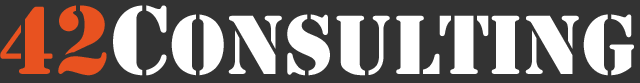
<style>
.page{position:relative;width:640px;height:83px;background:#333333}
.page>*{position:absolute;margin:0}
.t1{font:78px "StencilStd";color:#ffffff}
.t2{font:90px "StencilStd";color:#e85220}
.t3{font:90px "StencilStd";color:#ffffff}
</style>
<div class="page">
<p class="t1" style="left:0px;top:5px;width:634px;height:71px"><span class="t2">42</span><span class="t3">C</span>ONSULTING</p>
</div>
